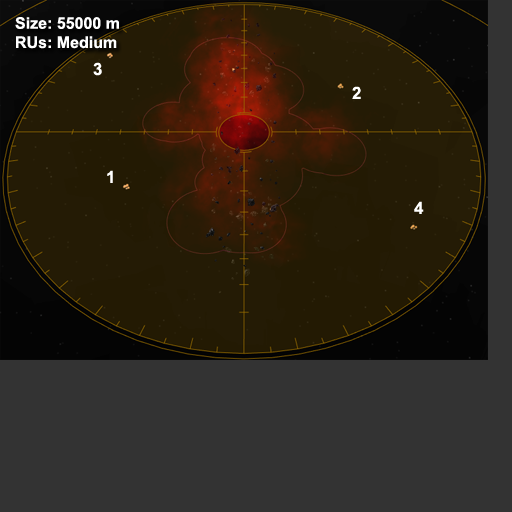
<style>
.page{position:relative;width:512px;height:512px;background:#333333}
.page>*{position:absolute;margin:0}
.t1{font:16px "Arial-BoldMT";color:#ffffff}
.t2{font:17px "Arial-BoldMT";color:#ffffff}
</style>
<div class="page">
<p class="t1" style="left:15px;top:17px;width:104px;height:32px">Size: 55000 m<br>RUs: Medium</p>
<p class="t2" style="left:93px;top:62px;width:9px;height:14px">3</p>
<p class="t2" style="left:352px;top:86px;width:9px;height:13px">2</p>
<p class="t2" style="left:107px;top:170px;width:6px;height:13px">1</p>
<p class="t2" style="left:414px;top:201px;width:10px;height:13px">4</p>
</div>
